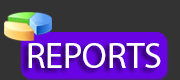
<style>
.page{position:relative;width:180px;height:80px;background:#333333}
.page>*{position:absolute;margin:0}
.t1{font:36px "MyriadPro-Regular";color:#ffffff}
</style>
<div class="page">
<p class="t1" style="left:28px;top:43px;width:133px;height:25px">REPORTS</p>
</div>
